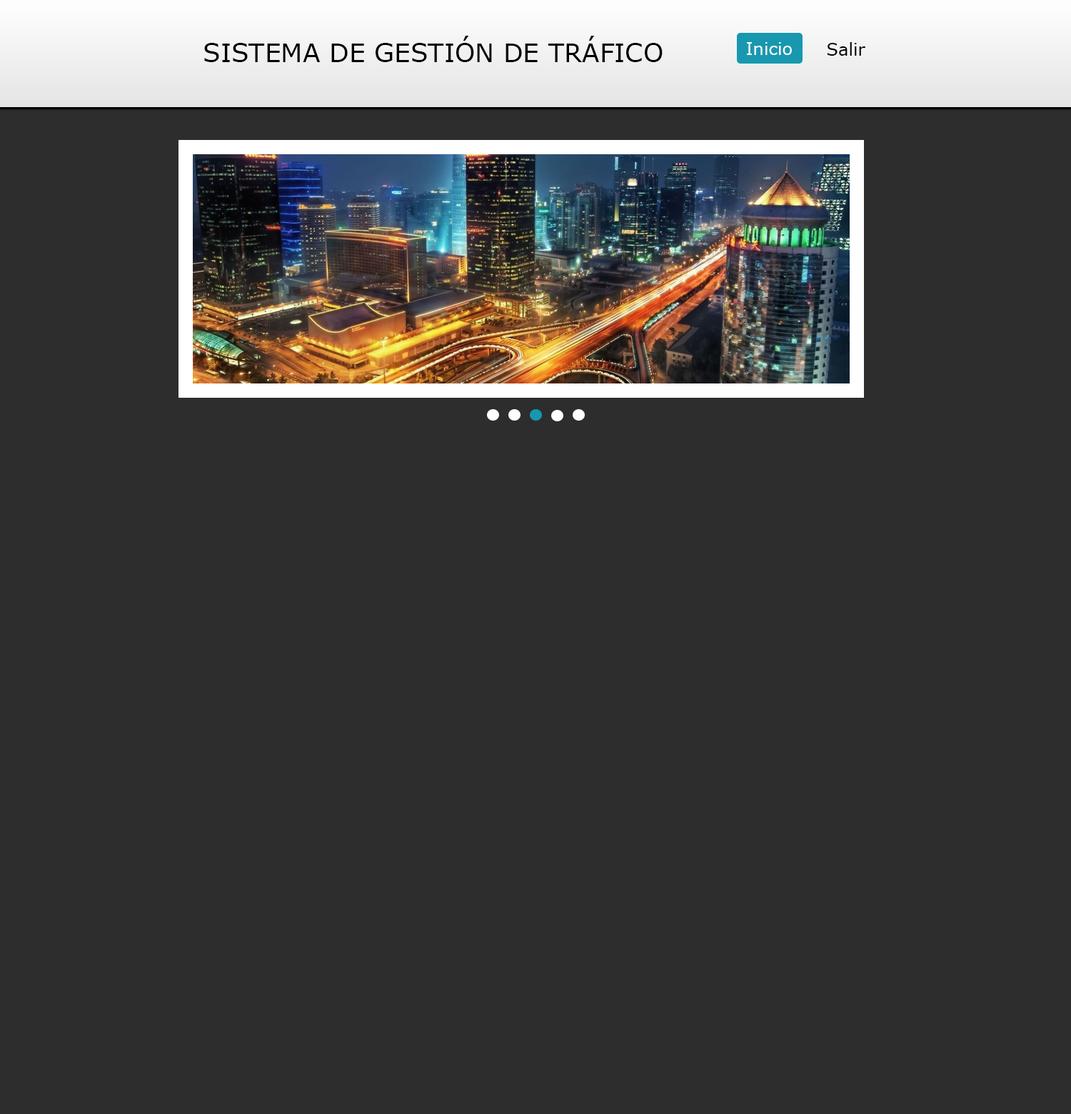
<style>
.page{position:relative;width:1071px;height:1114px;background:#2d2d2d}
.page>*{position:absolute;margin:0}
.t1{font:25.7px "Verdana";color:#000000}
.t2{font:17.1px "Verdana";color:#ffffff}
.t3{font:17.1px "Verdana";color:#000000}
</style>
<div class="page">
<p class="t1" style="left:204px;top:36px;width:458px;height:26px">SISTEMA DE GESTIÓN DE TRÁFICO</p>
<p class="t2" style="left:747px;top:42px;width:45px;height:13px">Inicio</p>
<p class="t3" style="left:827px;top:42px;width:38px;height:14px">Salir</p>
</div>
